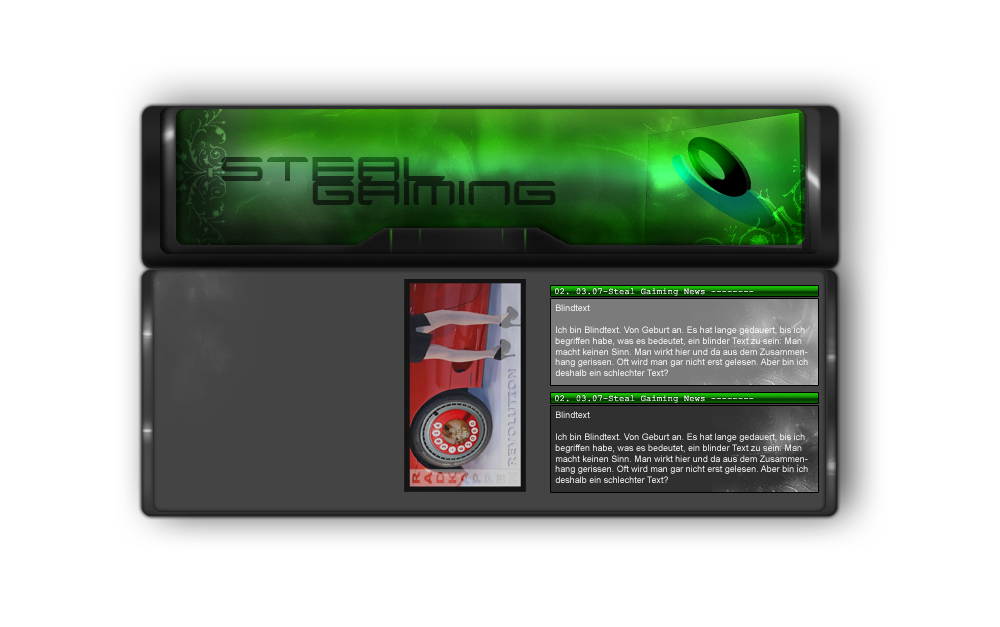
<style>
.page{position:relative;width:1000px;height:627px;background:#ffffff}
.page>*{position:absolute;margin:0}
.t1{font:48px "Xenotron"}
.t2{font:48px "Xenotron";color:#0e1e0f}
.t3{font:9px "CourierNewPSMT";color:#ffffff}
.t4{font:9px "ArialMT";color:#ffffff}
</style>
<div class="page">
<p class="t1" style="left:221px;top:157px;width:224px;height:24px">Steal</p>
<p class="t2" style="left:312px;top:181px;width:244px;height:24px">Gaiming</p>
<p class="t3" style="left:555px;top:288px;width:199px;height:8px">02. 03.07-Steal Gaiming News --------</p>
<p class="t4" style="left:555px;top:304px;width:253px;height:72px">Blindtext<br><br>Ich bin Blindtext. Von Geburt an. Es hat lange gedauert, bis ich begriffen habe, was es bedeutet, ein blinder Text zu sein: Man macht keinen Sinn. Man wirkt hier und da aus dem Zusammenhang gerissen. Oft wird man gar nicht erst gelesen. Aber bin ich deshalb ein schlechter Text?</p>
<p class="t3" style="left:555px;top:395px;width:199px;height:8px">02. 03.07-Steal Gaiming News --------</p>
<p class="t4" style="left:555px;top:411px;width:253px;height:72px">Blindtext<br><br>Ich bin Blindtext. Von Geburt an. Es hat lange gedauert, bis ich begriffen habe, was es bedeutet, ein blinder Text zu sein: Man macht keinen Sinn. Man wirkt hier und da aus dem Zusammenhang gerissen. Oft wird man gar nicht erst gelesen. Aber bin ich deshalb ein schlechter Text?</p>
</div>
